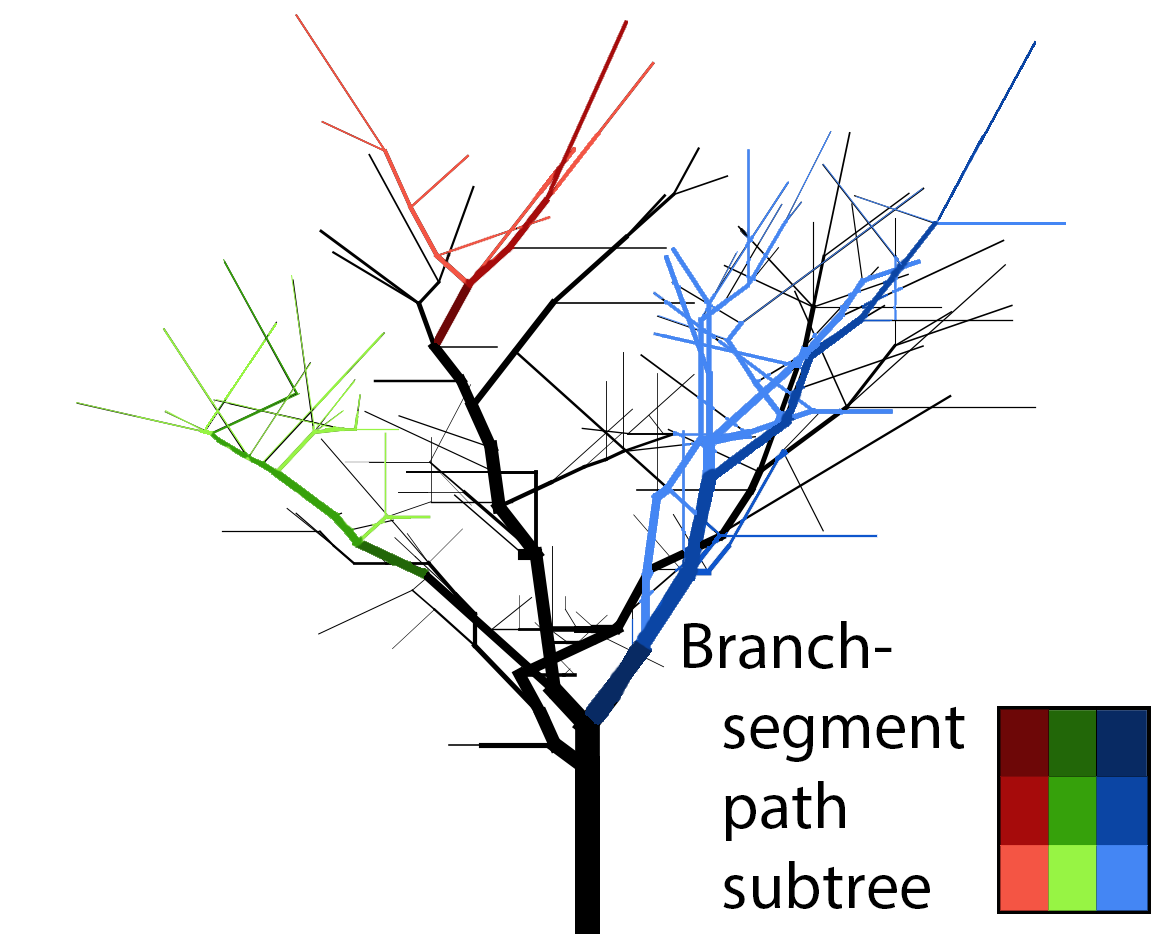
<style>
.page{position:relative;width:1172px;height:934px;background:#ffffff}
.page>*{position:absolute;margin:0}
.t1{font:66.7px "MyriadPro-Regular";color:#000000}
</style>
<div class="page">
<p class="t1" style="left:684px;top:621px;width:281px;height:288px">Branch-<br>   segment<br>   path<br>   subtree</p>
</div>
